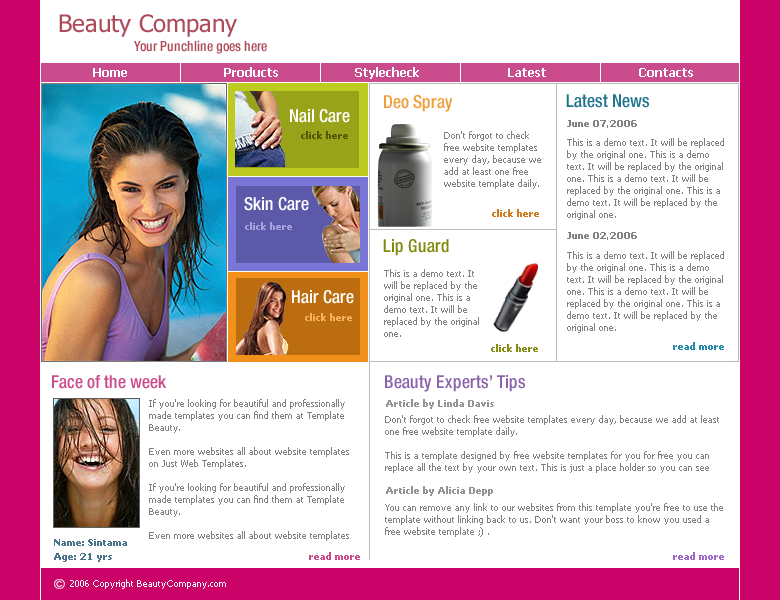
<style>
.page{position:relative;width:780px;height:600px;background:#ffffff}
.page>*{position:absolute;margin:0}
.t1{font:24px "Tahoma";color:#ad4b5a}
.t2{font:14px "HelveticaNeue-MediumCond";color:#ad4b5a}
.t3{font:12px "Tahoma-Bold";color:#ffffff}
.t4{font:18px "HelveticaNeue-MediumCond";color:#f19d3a}
.t5{font:18px "HelveticaNeue-MediumCond";color:#20738d}
.t6{font:18px "HelveticaNeue-MediumCond";color:#ffffff}
.t7{font:9px "Tahoma-Bold";color:#80807c}
.t8{font:9px "Tahoma-Bold";color:#525903}
.t9{font:9px/12px "Tahoma";color:#80807c}
.t10{font:9px "Tahoma-Bold";color:#d07c1a}
.t11{font:9px "Tahoma-Bold";color:#a5a3dd}
.t12{font:18px "HelveticaNeue-MediumCond";color:#818b0b}
.t13{font:9px "Tahoma-Bold";color:#f9b15b}
.t14{font:9px "Tahoma-Bold";color:#238aaa}
.t15{font:9px "Tahoma-Bold";color:#858e10}
.t16{font:18px "HelveticaNeue-MediumCond";color:#cb4c8c}
.t17{font:18px "HelveticaNeue-MediumCond";color:#8b63ab}
.t18{font:9px "Tahoma-Bold";color:#929393}
.t19{font:9px/14px "Tahoma-Bold";color:#487388}
.t20{font:9px "Tahoma-Bold";color:#cb4c8c}
.t21{font:9px "Tahoma-Bold";color:#9f6bc8}
.t22{font:9px "Tahoma";color:#ffffff}
</style>
<div class="page">
<p class="t1" style="left:59px;top:14px;width:178px;height:23px">Beauty Company</p>
<p class="t2" style="left:134px;top:40px;width:133px;height:14px">Your Punchline goes here</p>
<p class="t3" style="left:93px;top:67px;width:600px;height:12px">Home                        Products                   Stylecheck                      Latest                       Contacts</p>
<p class="t4" style="left:384px;top:95px;width:69px;height:17px">Deo Spray</p>
<p class="t5" style="left:566px;top:94px;width:83px;height:14px">Latest News</p>
<p class="t6" style="left:290px;top:109px;width:60px;height:14px">Nail Care</p>
<p class="t7" style="left:567px;top:120px;width:70px;height:8px">June 07,2006</p>
<p class="t8" style="left:301px;top:131px;width:47px;height:8px">click here</p>
<p class="t9" style="left:444px;top:131px;width:97px;height:58px">Don't forgot to check free website templates every day, because we add at least one free website template daily.</p>
<p class="t9" style="left:567px;top:138px;width:157px;height:82px">This is a demo text. It will be replaced by the original one. This is a demo text. It will be replaced by the original one. This is a demo text. It will be replaced by the original one. This is a demo text. It will be replaced by the original one.</p>
<p class="t6" style="left:244px;top:197px;width:65px;height:14px">Skin Care</p>
<p class="t10" style="left:492px;top:209px;width:47px;height:8px">click here</p>
<p class="t11" style="left:245px;top:222px;width:47px;height:8px">click here</p>
<p class="t7" style="left:567px;top:232px;width:70px;height:8px">June 02,2006</p>
<p class="t12" style="left:383px;top:239px;width:66px;height:17px">Lip Guard</p>
<p class="t9" style="left:567px;top:251px;width:157px;height:82px">This is a demo text. It will be replaced by the original one. This is a demo text. It will be replaced by the original one. This is a demo text. It will be replaced by the original one. This is a demo text. It will be replaced by the original one.</p>
<p class="t9" style="left:384px;top:269px;width:95px;height:68px">This is a demo text. It will be replaced by the original one. This is a demo text. It will be replaced by the original one.</p>
<p class="t6" style="left:292px;top:290px;width:62px;height:14px">Hair Care</p>
<p class="t13" style="left:305px;top:313px;width:47px;height:8px">click here</p>
<p class="t14" style="left:673px;top:342px;width:51px;height:8px">read more</p>
<p class="t15" style="left:491px;top:344px;width:47px;height:8px">click here</p>
<p class="t16" style="left:52px;top:375px;width:114px;height:14px">Face of the week</p>
<p class="t17" style="left:385px;top:375px;width:140px;height:17px">Beauty Experts’ Tips</p>
<p class="t9" style="left:149px;top:399px;width:200px;height:142px">If you're looking for beautiful and professionally made templates you can find them at Template Beauty.<br><br>Even more websites all about website templates on Just Web Templates.<br><br>If you're looking for beautiful and professionally made templates you can find them at Template Beauty.<br><br>Even more websites all about website templates on Just Web Templates.</p>
<p class="t18" style="left:386px;top:399px;width:108px;height:10px">Article by Linda Davis</p>
<p class="t9" style="left:385px;top:415px;width:334px;height:58px">Don't forgot to check free website templates every day, because we add at least one free website template daily.<br><br>This is a template designed by free website templates for you for free you can replace all the text by your own text. This is just a place holder so you can see how the site would look like.</p>
<p class="t18" style="left:386px;top:486px;width:107px;height:10px">Article by Alicia Depp</p>
<p class="t9" style="left:385px;top:503px;width:338px;height:34px">You can remove any link to our websites from this template you're free to use the template without linking back to us. Don't want your boss to know you used a free website template ;) .<br><br>If you're having problems editing the template please don't hesitate to ask for help on the forum.</p>
<p class="t19" style="left:54px;top:539px;width:73px;height:23px">Name: Sintama<br>Age: 21 yrs</p>
<p class="t20" style="left:309px;top:552px;width:51px;height:8px">read more</p>
<p class="t21" style="left:673px;top:552px;width:51px;height:8px">read more</p>
<p class="t22" style="left:70px;top:579px;width:156px;height:10px">2006 Copyright BeautyCompany.com</p>
</div>
